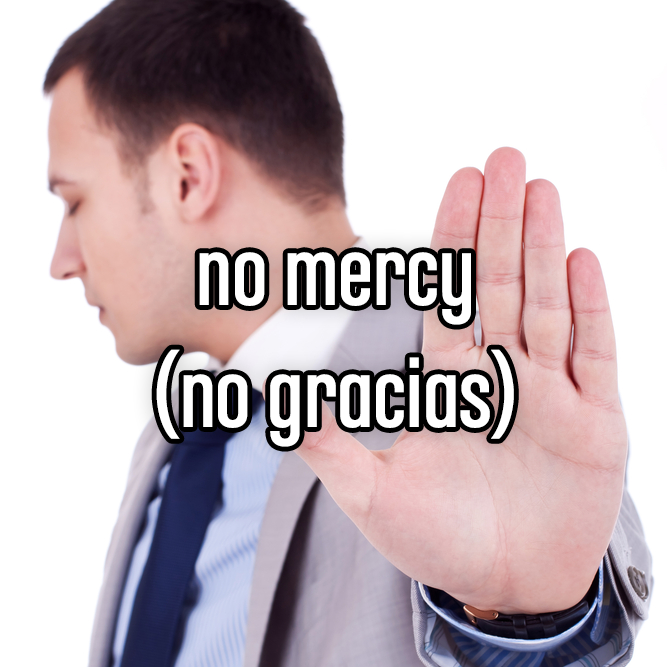
<style>
.page{position:relative;width:667px;height:667px;background:#ffffff}
.page>*{position:absolute;margin:0}
.t1{font:100.4px "ChaletComprime-CologneEighty";color:#ffffff;scale:1.06 1}
</style>
<div class="page">
<p class="t1" style="left:156px;top:252px;width:358px;height:195px;text-align:center">no mercy<br>(no gracias)</p>
</div>
